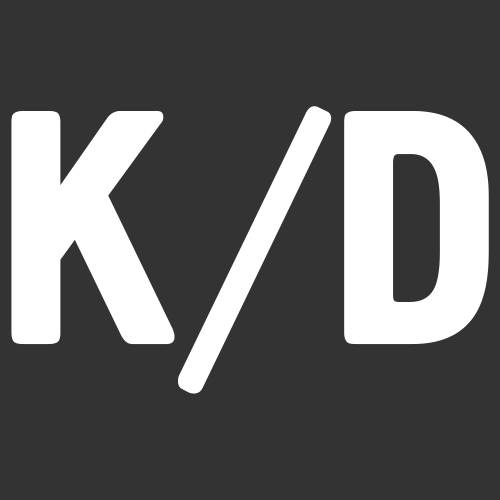
<style>
.page{position:relative;width:500px;height:500px;background:#333333}
.page>*{position:absolute;margin:0}
.t1{font:330px "Hermes";color:#ffffff}
</style>
<div class="page">
<p class="t1" style="left:11px;top:106px;width:478px;height:288px">K/D</p>
</div>
